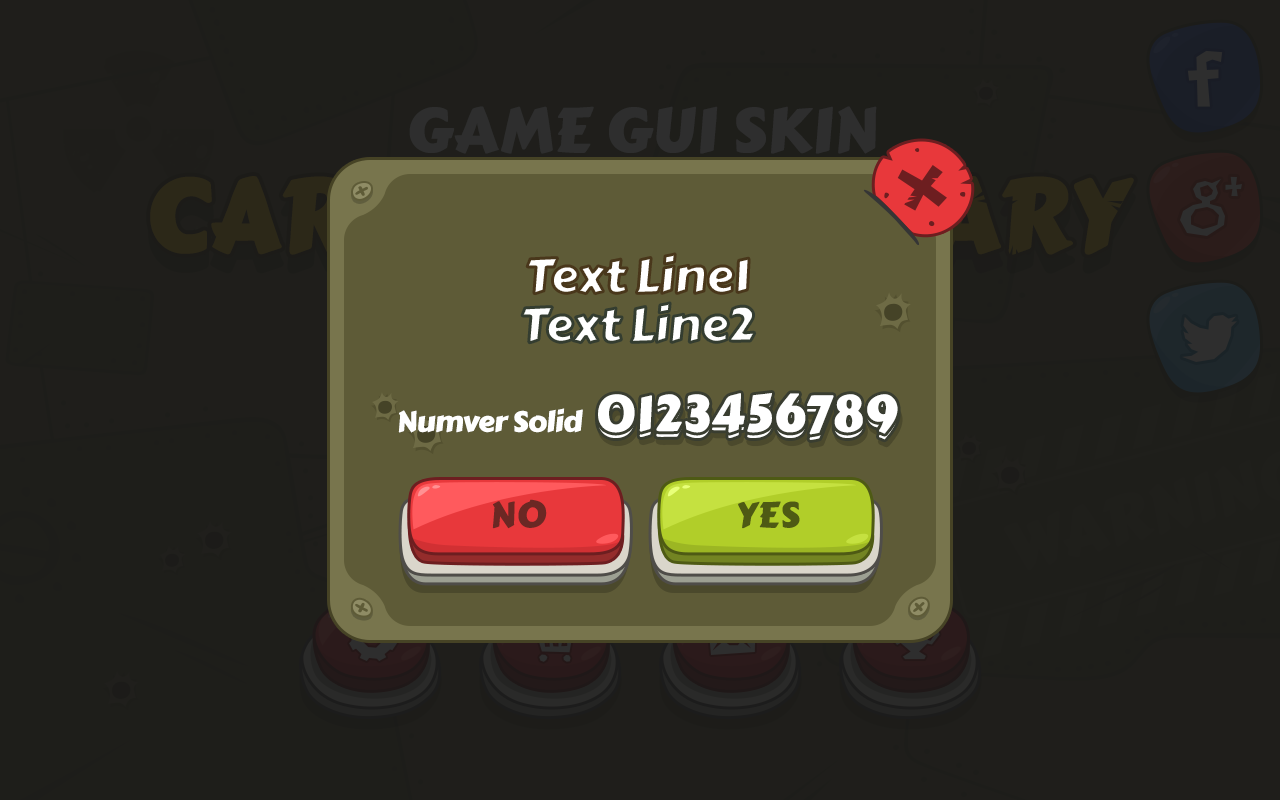
<style>
.page{position:relative;width:1280px;height:800px;background:#1f1e1b}
.page>*{position:absolute;margin:0}
.t1{font:47.5px "CarterOne";letter-spacing:-0.025em;scale:1.06 1}
.t2{font:50px "CarterOne";color:#ffffff;font-weight:bold}
.t3{font:28.5px "CarterOne";letter-spacing:-0.025em;color:#ffffff;scale:1.06 1}
.t4{font:35.2px "CarterOne";letter-spacing:-0.025em;color:#6b2824;text-transform:uppercase;font-weight:bold;scale:1.05 1}
.t5{font:35.2px "CarterOne";letter-spacing:-0.025em;color:#4e5a14;text-transform:uppercase;font-weight:bold;scale:1.05 1}
</style>
<div class="page">
<p class="t1" style="left:527px;top:254px;width:222px;height:40px">Text Line1</p>
<p class="t1" style="left:522px;top:303px;width:233px;height:40px">Text Line2</p>
<p class="t2" style="left:598px;top:398px;width:300px;height:42px">0123456789</p>
<p class="t2" style="left:598px;top:393px;width:300px;height:42px">0123456789</p>
<p class="t3" style="left:398px;top:408px;width:185px;height:25px">Numver Solid</p>
<p class="t4" style="left:492px;top:499px;width:55px;height:30px">no</p>
<p class="t5" style="left:738px;top:501px;width:62px;height:28px">yes</p>
</div>
